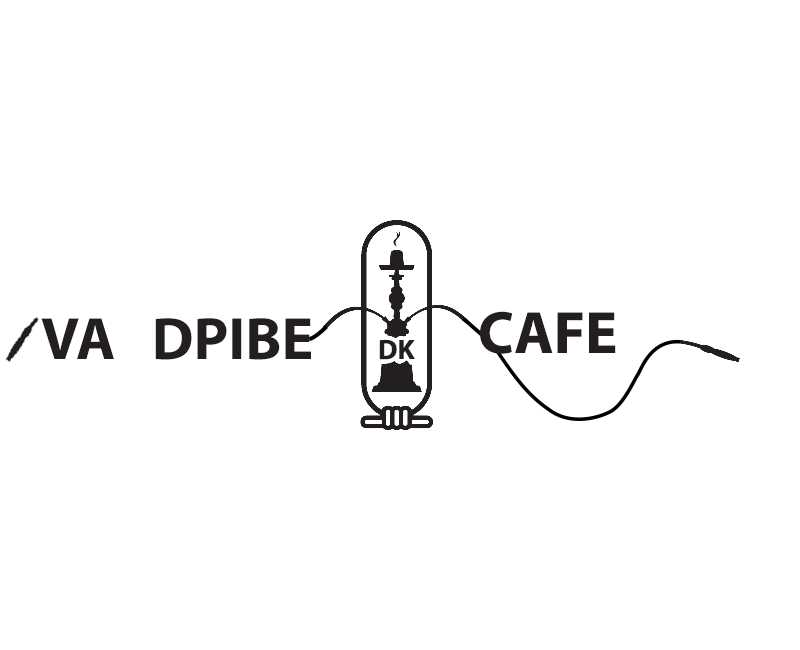
<style>
.page{position:relative;width:800px;height:650px;background:#ffffff}
.page>*{position:absolute;margin:0}
.t1{font:60px "MyriadPro-Bold";color:#231f20}
.t2{font:28px "MyriadPro-Bold";color:#231f20}
</style>
<div class="page">
<p class="t1" style="left:41px;top:318px;width:270px;height:42px">VA   DPIBE</p>
<p class="t1" style="left:480px;top:311px;width:136px;height:43px">CAFE</p>
<p class="t2" style="left:379px;top:339px;width:36px;height:21px">DK</p>
</div>
